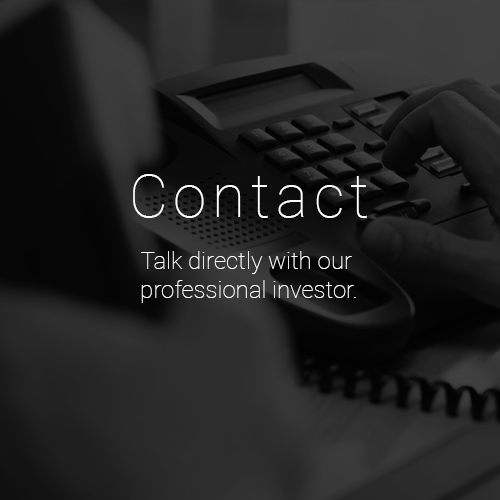
<style>
.page{position:relative;width:500px;height:500px}
.page>*{position:absolute;margin:0}
.t1{font:60px "Roboto-Thin";letter-spacing:0.1em;color:#ffffff}
.t2{font:24px "Roboto-Thin";color:#ffffff}
</style>
<div class="page">
<p class="t1" style="left:133px;top:174px;width:234px;height:44px">Contact</p>
<p class="t2" style="left:141px;top:251px;width:215px;height:52px;text-align:center">Talk directly with our <br>professional investor.</p>
</div>
